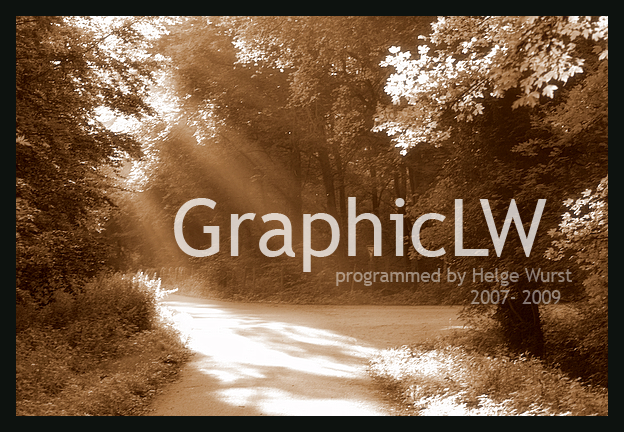
<style>
.page{position:relative;width:624px;height:432px}
.page>*{position:absolute;margin:0}
.t1{font:80px "TrebuchetMS";color:#d6ccc3}
.t2{font:18.7px "TrebuchetMS";color:#988575}
</style>
<div class="page">
<p class="t1" style="left:174px;top:197px;width:373px;height:75px">GraphicLW</p>
<p class="t2" style="left:336px;top:268px;width:236px;height:36px;text-align:right">programmed by Helge Wurst <br>2007- 2009</p>
</div>
